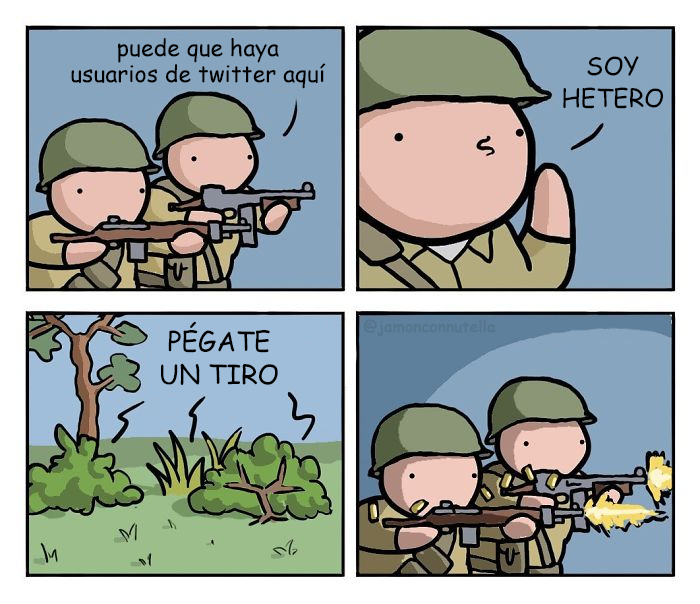
<style>
.page{position:relative;width:700px;height:604px}
.page>*{position:absolute;margin:0}
.t1{font:23px "ComicSansMS";color:#000000}
.t2{font:24.9px "ComicSansMS";color:#000000}
.t3{font:26.7px "ComicSansMS";color:#000000}
.t4{font:15.7px "ComicSansMS-Bold";color:#55748d}
</style>
<div class="page">
<p class="t1" style="left:71px;top:38px;width:255px;height:51px;text-align:center">puede que haya<br>usuarios de twitter aquí</p>
<p class="t2" style="left:563px;top:56px;width:100px;height:53px;text-align:center">SOY<br>HETERO</p>
<p class="t3" style="left:161px;top:321px;width:117px;height:64px;text-align:center">PÉGATE<br>UN TIRO</p>
<p class="t4" style="left:363px;top:319px;width:133px;height:18px">@jamonconnutella</p>
</div>
